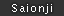
<style>
.page{position:relative;width:64px;height:16px;background:#333333}
.page>*{position:absolute;margin:0}
.t1{font:11px "LucidaSans";letter-spacing:0.1em;color:#ffffff}
</style>
<div class="page">
<p class="t1" style="left:12px;top:4px;width:40px;height:10px">Saionji</p>
</div>
